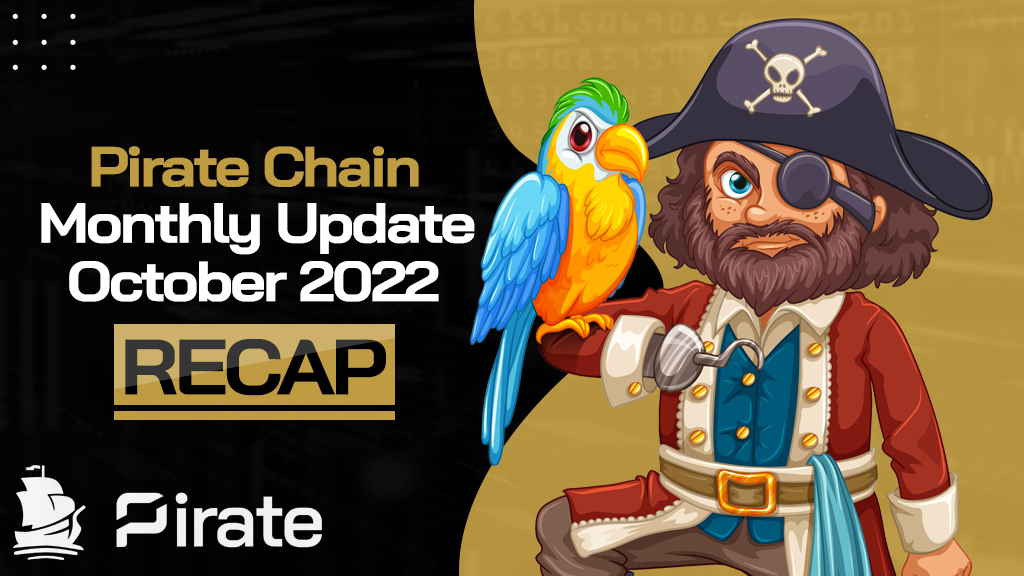
<style>
.page{position:relative;width:1024px;height:576px}
.page>*{position:absolute;margin:0}
.t1{font:36px "LetterGothicStd";letter-spacing:0.2em;color:#ffffff;text-transform:uppercase}
.t2{font:56.4px "BaiJamjuree-Bold";letter-spacing:-0.05em;color:#bf9b41;scale:1.1 1}
.t3{font:56.4px "BaiJamjuree-Bold";letter-spacing:-0.05em;color:#ffffff;scale:1.1 1}
.t4{font:78.2px "BaiJamjuree-Bold";letter-spacing:-0.05em;scale:1.1 1}
</style>
<div class="page">
<p class="t1" style="left:12px;top:13px;width:64px;height:6px">...</p>
<p class="t1" style="left:12px;top:39px;width:64px;height:6px">...</p>
<p class="t1" style="left:12px;top:64px;width:64px;height:6px">...</p>
<p class="t2" style="left:91px;top:146px;width:328px;height:41px">Pirate Chain</p>
<p class="t3" style="left:41px;top:203px;width:434px;height:52px">Monthly Update</p>
<p class="t3" style="left:69px;top:261px;width:370px;height:41px">October 2022</p>
<p class="t4" style="left:125px;top:339px;width:261px;height:57px">RECAP</p>
</div>
